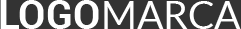
<style>
.page{position:relative;width:241px;height:29px;background:#333333}
.page>*{position:absolute;margin:0}
.t1{font:40px "Roboto-Bold";color:#ffffff}
.t2{font:39px "Lato-Regular";color:#ffffff}
</style>
<div class="page">
<p class="t1" style="left:0px;top:0px;width:99px;height:29px">LOGO</p>
<p class="t2" style="left:104px;top:1px;width:137px;height:28px">MARCA</p>
</div>
